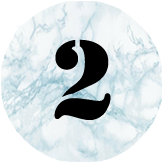
<style>
.page{position:relative;width:164px;height:164px;background:#ffffff}
.page>*{position:absolute;margin:0}
.t1{font:103.8px "StencilStd";color:#000000}
</style>
<div class="page">
<p class="t1" style="left:54px;top:39px;width:57px;height:81px">2</p>
</div>
